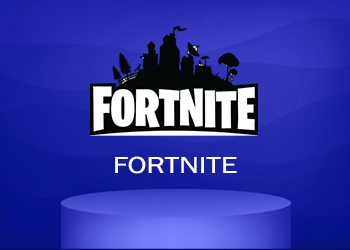
<style>
.page{position:relative;width:350px;height:250px}
.page>*{position:absolute;margin:0}
.t1{font:23.7px "FranklinGothic-Book";color:#ffffff;scale:1.27 1}
</style>
<div class="page">
<p class="t1" style="left:115px;top:156px;width:122px;height:18px">FORTNITE</p>
</div>
